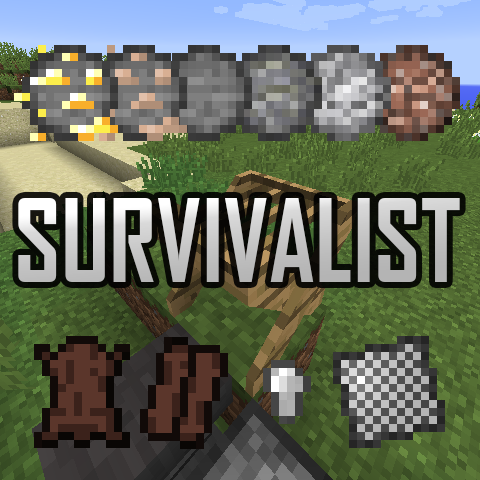
<style>
.page{position:relative;width:480px;height:480px}
.page>*{position:absolute;margin:0}
.t1{font:110px "AgencyFB-Bold";color:#cacaca;font-variant:small-caps;scale:0.93 1}
</style>
<div class="page">
<p class="t1" style="left:18px;top:198px;width:442px;height:84px">SURVIVALIST</p>
</div>
